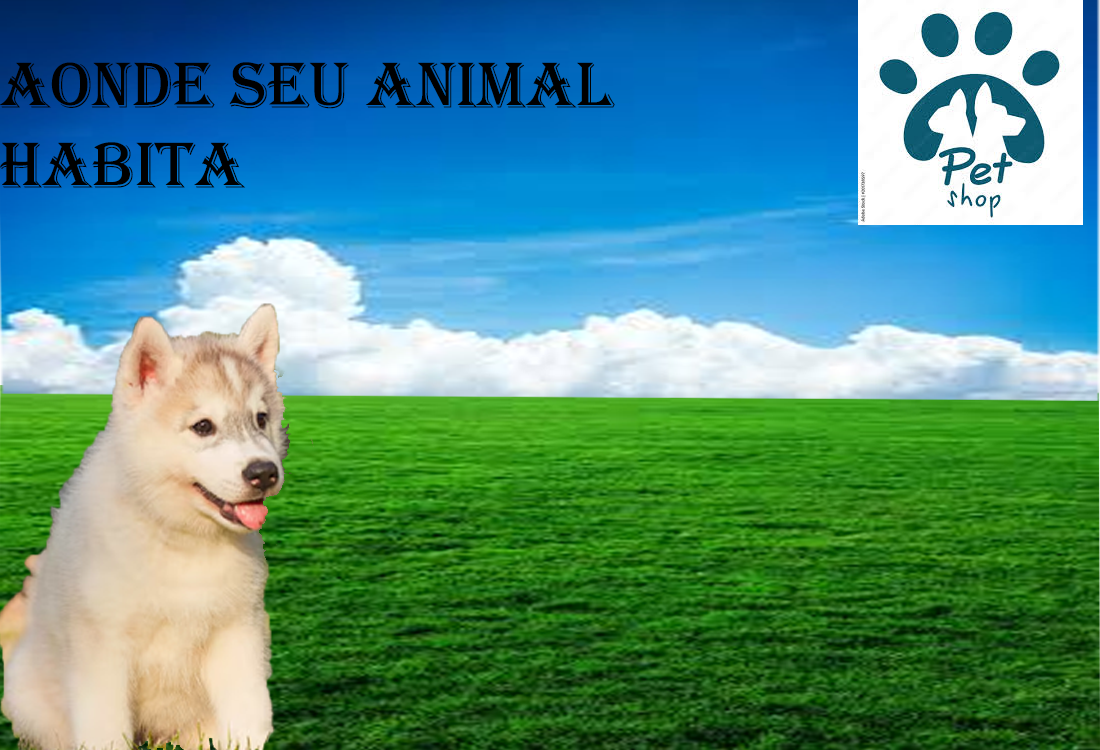
<style>
.page{position:relative;width:1100px;height:750px}
.page>*{position:absolute;margin:0}
.t1{font:66.7px "Algerian";color:#000000}
</style>
<div class="page">
<p class="t1" style="left:0px;top:62px;width:615px;height:126px">aonde seu animal <br>habita</p>
</div>
